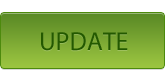
<style>
.page{position:relative;width:168px;height:80px;background:#ffffff}
.page>*{position:absolute;margin:0}
.t1{font:26px "MyriadPro-Regular";color:#235900}
.t2{font:20px "MyriadPro-Regular";color:#235900}
</style>
<div class="page">
<p class="t1" style="left:41px;top:32px;width:87px;height:19px"><span class="t2">  </span>    UPDATE</p>
</div>
